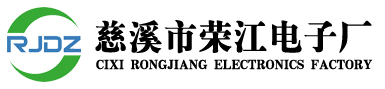
<style>
.page{position:relative;width:385px;height:89px;background:#ffffff}
.page>*{position:absolute;margin:0}
.t1{font:35px "HYa9gj";color:#000000;text-transform:uppercase}
.t2{font:13px "HYa9gj";color:#000000;text-transform:uppercase}
</style>
<div class="page">
<p class="t1" style="left:95px;top:20px;width:277px;height:34px">慈溪市荣江电子厂</p>
<p class="t2" style="left:96px;top:59px;width:277px;height:11px">Cixi RongJiang electronics factory</p>
</div>
